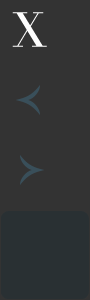
<style>
.page{position:relative;width:90px;height:300px;background:#333333}
.page>*{position:absolute;margin:0}
.t1{font:48px "Didot";color:#fefefe}
</style>
<div class="page">
<p class="t1" style="left:12px;top:12px;width:35px;height:35px">X</p>
</div>
